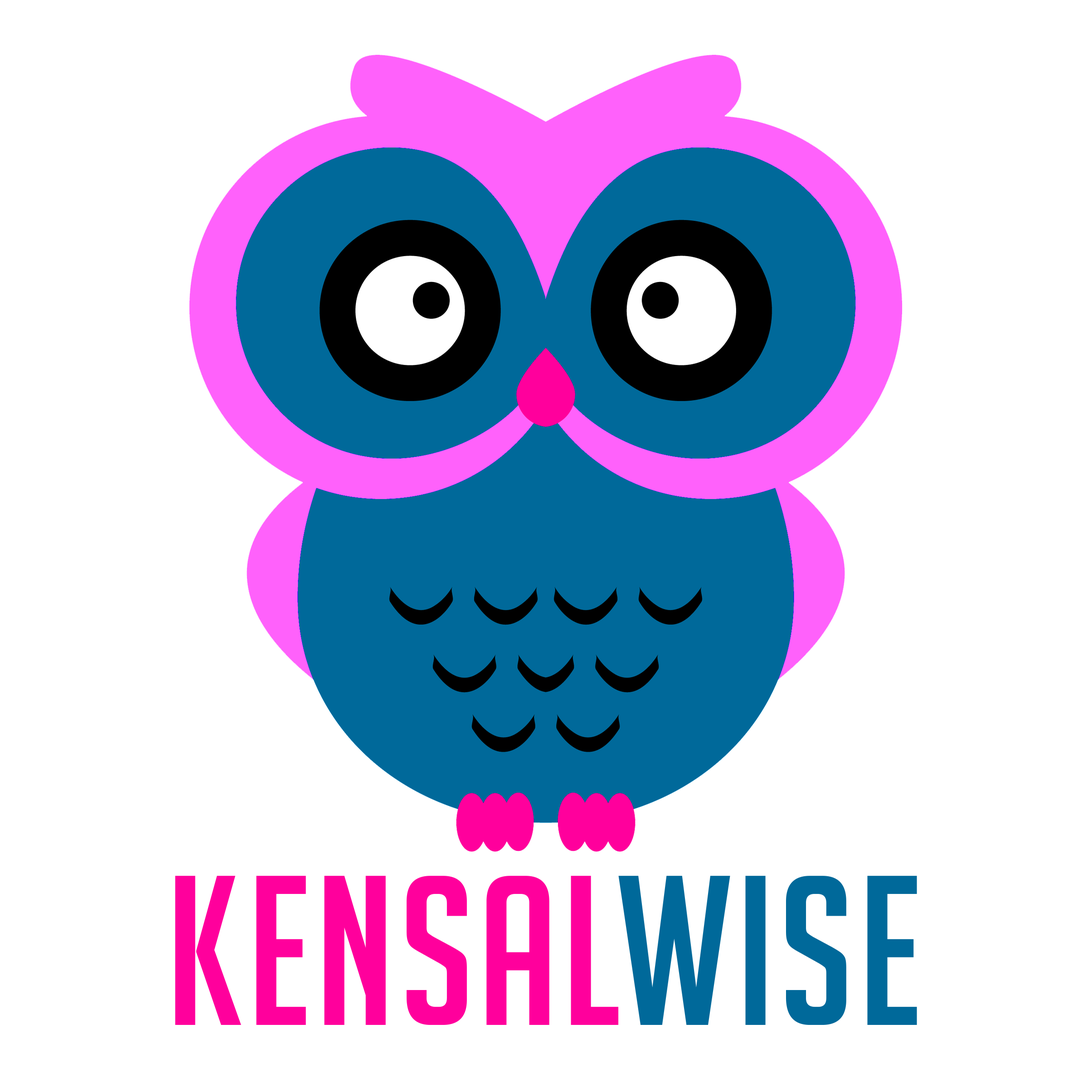
<style>
.page{position:relative;width:1092px;height:1092px;background:#ffffff}
.page>*{position:absolute;margin:0}
.t1{font:207.7px "BigNoodleTitling";letter-spacing:0.02em;color:#ff009c}
.t2{font:207.7px "BigNoodleTitling";letter-spacing:0.02em;color:#00699a}
</style>
<div class="page">
<p class="t1" style="left:175px;top:876px;width:742px;height:149px">KENSAL<span class="t2">WISE</span></p>
</div>
